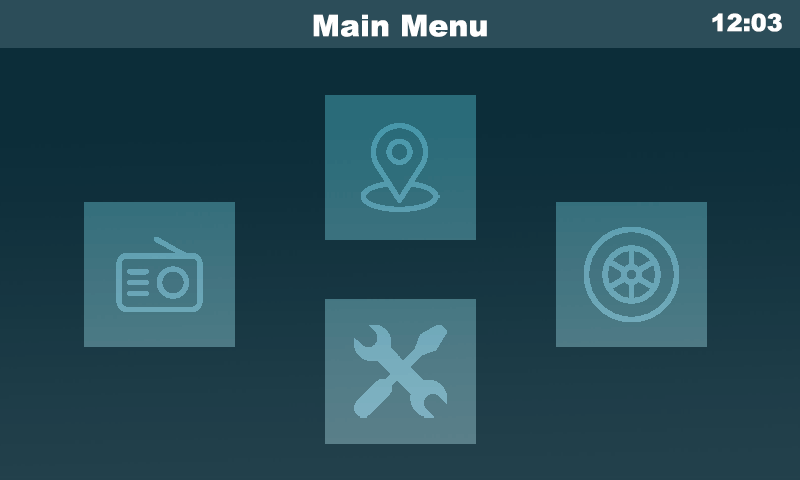
<style>
.page{position:relative;width:800px;height:480px}
.page>*{position:absolute;margin:0}
.t1{font:30px "Arial-Black";color:#ffffff}
.t2{font:24px "Arial-Black";color:#ffffff}
</style>
<div class="page">
<p class="t1" style="left:313px;top:14px;width:174px;height:23px">Main Menu</p>
<p class="t2" style="left:712px;top:13px;width:70px;height:19px">12:03</p>
</div>
